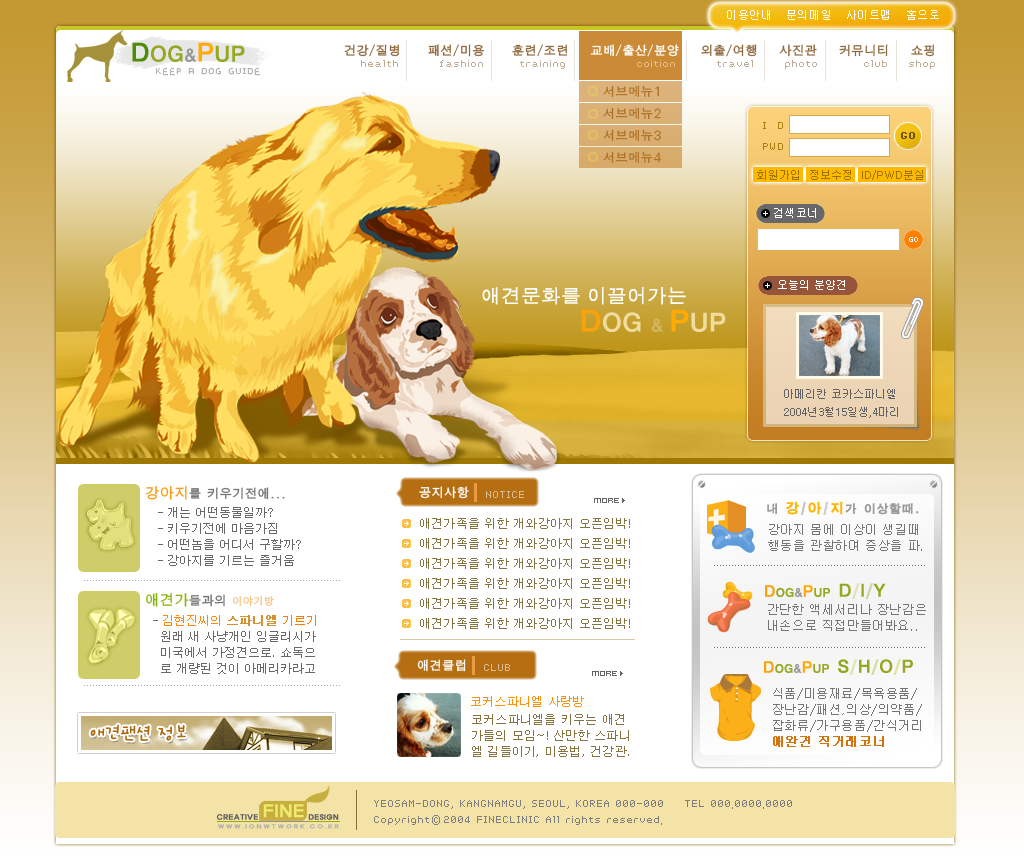
<style>
.page{position:relative;width:1024px;height:864px;background:#ffffff}
.page>*{position:absolute;margin:0}
.t1{font:11px "Gulim";letter-spacing:0.05em;color:#ffffff}
.t2{font:22px "SandKg";letter-spacing:0.05em;color:#96a724}
.t3{font:26px "SandKg";letter-spacing:0.05em;color:#4d8d08}
.t4{font:18px "SandKg";letter-spacing:0.05em;color:#989896}
.t5{font:26px "SandKg";letter-spacing:0.05em;color:#ffaa05}
.t6{font:12px "ÅÂ-°íµñD-Regular";letter-spacing:0.05em;color:#91693f}
.t7{font:12px "ÅÂ-°íµñD-Regular";letter-spacing:0.05em;color:#ffffff}
.t8{font:12px "Âü»ç¶û°¡³ª´Ù9";color:#c1ab93}
.t9{font:12px "nari9";color:#b4b4b2}
.t10{font:12px/22px "ÅÂ-°íµñR-Regular";letter-spacing:0.05em;color:#ac7226}
.t11{font:12px/21px "Âü»ç¶û°¡³ª´Ù9";color:#a5800c}
.t12{font:12px/21px "Âü»ç¶û°¡³ª´Ù9";letter-spacing:0.025em;color:#a5800c}
.t13{font:12px "Âü»ç¶û°¡³ª´Ù9";letter-spacing:0.025em;color:#6d5408;font-weight:bold}
.t14{font:11px "Dotum";color:#9c7303}
.t15{font:11px "Gulim";color:#ffffff}
.t16{font:20px "MDotum";color:#ffffff}
.t17{font:26px "SandKg";letter-spacing:0.05em;color:#f0dc9e}
.t18{font:30px "SandKg";letter-spacing:0.05em;color:#faa20a}
.t19{font:18px "SandKg";letter-spacing:0.05em;color:#d3b661}
.t20{font:30px "SandKg";letter-spacing:0.05em;color:#ffaa05}
.t21{font:11px/18px "Gulim";color:#626262}
.t22{font:12px "ÅÂ-°íµñD-Regular";letter-spacing:0.05em;color:#747474}
.t23{font:14px "ÅÂ-°íµñD-Regular";letter-spacing:0.05em;color:#f49d15}
.t24{font:12px "Âü»ç¶û°¡³ª´Ù9";color:#d9b990}
.t25{font:12px/16px "Dotum";color:#686868}
.t26{font:12px "KyunKo";letter-spacing:0.05em;color:#9c9c9c}
.t27{font:14px "KyunKo";letter-spacing:0.05em;color:#ffb503}
.t28{font:14px "KyunKo";letter-spacing:0.05em;color:#c1c1c1}
.t29{font:14px "KyunKo";letter-spacing:0.05em;color:#cbcbcb}
.t30{font:12px/16px "Gulim";letter-spacing:0.05em;color:#757575}
.t31{font:10px "ÅÂ-°íµñD-Regular";letter-spacing:0.05em;color:#f8c281}
.t32{font:14px "ÅÂ-°íµñD-Regular";letter-spacing:0.05em;color:#89b60e}
.t33{font:12px "SandKg";letter-spacing:0.05em;color:#96a724}
.t34{font:16px "SandKg";letter-spacing:0.05em;color:#faa20a}
.t35{font:12px "SandKg";letter-spacing:0.05em;color:#989896}
.t36{font:16px "SandKg";letter-spacing:0.05em;color:#ffaa05}
.t37{font:18px "SandKg";letter-spacing:0.08em;color:#96a724}
.t38{font:18px "SandKg";letter-spacing:0.08em;color:#dde4ad}
.t39{font:18px "SandKg";letter-spacing:0.08em;color:#ced4a5}
.t40{font:12px/16px "Dotum";color:#ff890b}
.t41{font:12px/16px "Dotum";color:#d3932e;font-weight:bold}
.t42{font:12px/16px "Dotum";color:#fa7907}
.t43{font:12px "Âü»ç¶û°¡³ª´Ù9";color:#dbbb93}
.t44{font:18px "SandKg";letter-spacing:0.08em;color:#d4dba4}
.t45{font:18px "SandKg";letter-spacing:0.08em;color:#dce698}
.t46{font:12px/16px "Gulim";letter-spacing:0.05em;color:#d4740d;font-weight:bold}
.t47{font:12px "Dotum";letter-spacing:0.02em;color:#ff9102}
.t48{font:22px "SanKsM";color:#ae6a11}
.t49{font:12px/16px "Dotum";letter-spacing:0.02em;color:#857442}
.t50{font:18.4px "¼Û¼ºÈÆ-½Å¶ó";color:#f0ea6e}
.t51{font:12px "Âü»ç¶û°¡³ª´Ù9";color:#7f7f7f}
.t52{font:7.8px "¼Û¼ºÈÆ-½Å¶ó";color:#5d5d5d}
.t53{font:12px "Dotum";color:#7f7f7f}
.t54{font:5.7px "¼Û¼ºÈÆ-½Å¶ó";letter-spacing:0.22em;color:#b0b0b0;scale:1.25 1}
</style>
<div class="page">
<p class="t1" style="left:727px;top:10px;width:212px;height:10px">이용안내   문의메일   사이트맵   홈으로</p>
<p class="t2" style="left:132px;top:42px;width:113px;height:20px"><span class="t3">D</span>OG<span class="t4">&amp;</span><span class="t5">P</span>UP</p>
<p class="t6" style="left:344px;top:44px;width:590px;height:13px">건강/질병     패션/미용     훈련/조련    <span class="t7">교배/출산/분양</span>    외출/여행    사진관    커뮤니티    쇼핑</p>
<p class="t8" style="left:361px;top:60px;width:574px;height:9px">health        fashion       training              coition        travel      photo         club    shop</p>
<p class="t9" style="left:156px;top:68px;width:104px;height:8px">KEEP A DOG GUIDE</p>
<p class="t10" style="left:603px;top:85px;width:59px;height:78px">서브메뉴1<br>서브메뉴2<br>서브메뉴3<br>서브메뉴4</p>
<p class="t11" style="left:763px;top:122px;width:20px;height:28px">I  D<br><span class="t12">PWD</span></p>
<p class="t13" style="left:901px;top:132px;width:14px;height:7px">GO</p>
<p class="t14" style="left:757px;top:170px;width:166px;height:10px">회원가입  정보수정  ID/PWD분실</p>
<p class="t1" style="left:774px;top:208px;width:42px;height:10px">검색코너</p>
<p class="t15" style="left:778px;top:280px;width:67px;height:10px">오늘의 분양견</p>
<p class="t16" style="left:482px;top:287px;width:204px;height:18px">애견문화를 이끌어가는</p>
<p class="t17" style="left:581px;top:309px;width:145px;height:23px"><span class="t18">D</span>OG <span class="t19">&amp; </span><span class="t20">P</span>UP</p>
<p class="t21" style="left:784px;top:389px;width:114px;height:29px">아메리칸 코카스파니엘<br>2004년3월15일생,4마리</p>
<p class="t22" style="left:145px;top:486px;width:140px;height:14px"><span class="t23">강아지</span>를 키우기전에...</p>
<p class="t7" style="left:419px;top:486px;width:50px;height:13px">공지사항</p>
<p class="t24" style="left:486px;top:491px;width:38px;height:7px">NOTICE</p>
<p class="t25" style="left:158px;top:507px;width:143px;height:59px">- 개는 어떤동물일까?<br>- 키우기전에 마음가짐<br>- 어떤놈을 어디서 구할까?<br>- 강아지를 기르는 즐거움</p>
<p class="t26" style="left:767px;top:501px;width:152px;height:14px">내 <span class="t27">강</span><span class="t28">/</span><span class="t27">아</span><span class="t29">/</span><span class="t27">지</span>가 이상할때.</p>
<p class="t30" style="left:768px;top:524px;width:154px;height:27px">강아지 몸에 이상이 생길때 <br>행동을 관찰하여 증상을 파.</p>
<p class="t31" style="left:146px;top:593px;width:128px;height:14px"><span class="t32">애견가</span><span class="t22">들과의 </span>이야기방</p>
<p class="t33" style="left:765px;top:583px;width:121px;height:16px"><span class="t34">D</span>OG<span class="t35">&amp;</span><span class="t36">P</span>UP  <span class="t37">D</span><span class="t38">/</span><span class="t37">I</span><span class="t39">/</span><span class="t37">Y</span></p>
<p class="t30" style="left:768px;top:604px;width:158px;height:27px">간단한 액세서리나 장난감은<br>내손으로 직접만들어봐요..</p>
<p class="t25" style="left:153px;top:615px;width:163px;height:59px">- <span class="t40">김현진씨의 </span><span class="t41">스파니엘 </span><span class="t42">기르기<br></span>  원래 새 사냥개인 잉글리시가 <br>  미국에서 가정견으로. 쇼독으<br>  로 개량된 것이 아메리카라고</p>
<p class="t7" style="left:417px;top:659px;width:49px;height:13px">애견클럽</p>
<p class="t43" style="left:484px;top:664px;width:26px;height:7px">CLUB</p>
<p class="t33" style="left:764px;top:659px;width:149px;height:16px"><span class="t34">D</span>OG<span class="t35">&amp;</span><span class="t36">P</span>UP  <span class="t37">S</span><span class="t38">/</span><span class="t37">H</span><span class="t44">/</span><span class="t37">O</span><span class="t45">/</span><span class="t37">P</span></p>
<p class="t30" style="left:773px;top:688px;width:149px;height:59px">식품/미용재료/목욕용품/<br>장난감/패션,의상/의약품/<br>잡화류/가구용품/간식거리<br><span class="t46">애완견 직거래코너</span></p>
<p class="t47" style="left:471px;top:696px;width:113px;height:11px">코커스파니엘 사랑방</p>
<p class="t48" style="left:90px;top:724px;width:96px;height:17px">애견팬션 정보</p>
<p class="t49" style="left:472px;top:714px;width:157px;height:43px">코커스파니엘을 키우는 애견<br>가들의 모임~! 산만한 스파니<br>엘 길들이기, 미용법, 건강관.</p>
<p class="t50" style="left:263px;top:804px;width:41px;height:14px">FINE</p>
<p class="t51" style="left:374px;top:800px;width:418px;height:9px">YEOSAM-DONG, KANGNAMGU, SEOUL, KOREA 000-000    TEL 000.0000.0000</p>
<p class="t52" style="left:216px;top:814px;width:123px;height:6px">CREATIVE                DESIGN</p>
<p class="t51" style="left:374px;top:816px;width:288px;height:9px">Copyright   2004 FINECLINIC All rights reserved.</p>
<p class="t53" style="left:432px;top:815px;width:8px;height:10px">©</p>
<p class="t54" style="left:218px;top:824px;width:121px;height:5px">WWW.IONWTWORK.CO.KR</p>
</div>
